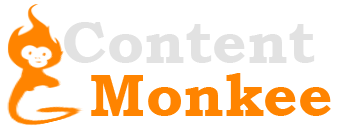
<style>
.page{position:relative;width:340px;height:130px;background:#ffffff}
.page>*{position:absolute;margin:0}
.t1{font:60px "BookmanOldStyle-Bold";color:#e2e2e2}
.t2{font:60px "BookmanOldStyle-Bold";color:#ff8400}
</style>
<div class="page">
<p class="t1" style="left:64px;top:22px;width:251px;height:41px">Content</p>
<p class="t2" style="left:91px;top:73px;width:240px;height:43px">Monkee</p>
</div>
